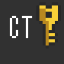
<style>
.page{position:relative;width:64px;height:64px;background:#313131}
.page>*{position:absolute;margin:0}
.t1{font:32px "ReturnOfGanonReg";color:#ffffff}
</style>
<div class="page">
<p class="t1" style="left:9px;top:15px;width:24px;height:24px">CT</p>
</div>
